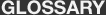
<style>
.page{position:relative;width:106px;height:15px;background:#333333}
.page>*{position:absolute;margin:0}
.t1{font:19px "HelveticaNeue-Bold";color:#f3f3f3}
</style>
<div class="page">
<p class="t1" style="left:1px;top:0px;width:104px;height:15px">GLOSSARY</p>
</div>
